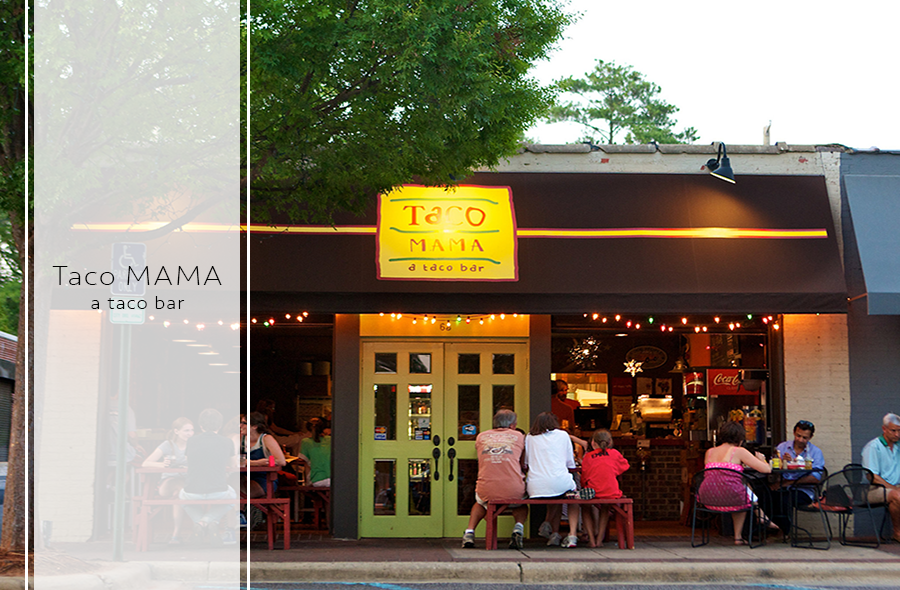
<style>
.page{position:relative;width:900px;height:590px}
.page>*{position:absolute;margin:0}
.t1{font:28.2px "Seravek-ExtraLight";letter-spacing:0.05em;color:#000000;scale:1.12 1}
.t2{font:18.8px "Seravek-ExtraLight";letter-spacing:0.05em;color:#000000;scale:1.12 1}
</style>
<div class="page">
<p class="t1" style="left:52px;top:266px;width:170px;height:19px">Taco MAMA</p>
<p class="t2" style="left:91px;top:296px;width:94px;height:13px">a taco bar</p>
</div>
